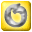
<style>
.page{position:relative;width:32px;height:32px}
.page>*{position:absolute;margin:0}
.t1{font:28.6px "Eldorado";letter-spacing:0.2em;font-weight:bold}
</style>
<div class="page">
<p class="t1" style="left:4px;top:3px;width:24px;height:25px">O</p>
</div>
